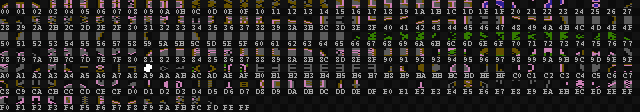
<style>
.page{position:relative;width:640px;height:112px;background:#121212}
.page>*{position:absolute;margin:0}
.t1{font:8px "Courier";letter-spacing:0.065em;color:#a8a8a8}
</style>
<div class="page">
<p class="t1" style="left:1px;top:9px;width:630px;height:5px">00 01 02 03 04 05 06 07 08 09 0A 0B 0C 0D 0E 0F 10 11 12 13 14 15 16 17 18 19 1A 1B 1C 1D 1E 1F 20 21 22 23 24 25 26 27</p>
<p class="t1" style="left:1px;top:25px;width:631px;height:5px">28 29 2A 2B 2C 2D 2E 2F 30 31 32 33 34 35 36 37 38 39 3A 3B 3C 3D 3E 3F 40 41 42 43 44 45 46 47 48 49 4A 4B 4C 4D 4E 4F</p>
<p class="t1" style="left:1px;top:41px;width:631px;height:5px">50 51 52 53 54 55 56 57 58 59 5A 5B 5C 5D 5E 5F 60 61 62 63 64 65 66 67 68 69 6A 6B 6C 6D 6E 6F 70 71 72 73 74 75 76 77</p>
<p class="t1" style="left:1px;top:57px;width:631px;height:5px">78 79 7A 7B 7C 7D 7E 7F 80 81 82 83 84 85 86 87 88 89 8A 8B 8C 8D 8E 8F 90 91 92 93 94 95 96 97 98 99 9A 9B 9C 9D 9E 9F</p>
<p class="t1" style="left:0px;top:73px;width:632px;height:5px">A0 A1 A2 A3 A4 A5 A6 A7 A8 A9 AA AB AC AD AE AF B0 B1 B2 B3 B4 B5 B6 B7 B8 B9 BA BB BC BD BE BF C0 C1 C2 C3 C4 C5 C6 C7</p>
<p class="t1" style="left:0px;top:89px;width:632px;height:5px">C8 C9 CA CB CC CD CE CF D0 D1 D2 D3 D4 D5 D6 D7 D8 D9 DA DB DC DD DE DF E0 E1 E2 E3 E4 E5 E6 E7 E8 E9 EA EB EC ED EE EF</p>
<p class="t1" style="left:0px;top:105px;width:249px;height:5px">F0 F1 F2 F3 F4 F5 F6 F7 F8 F9 FA FB FC FD FE FF</p>
</div>
